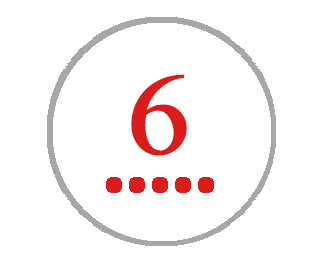
<style>
.page{position:relative;width:318px;height:276px;background:#ffffff}
.page>*{position:absolute;margin:0}
.t1{font:139.6px "OriyaMN";color:#dc1b1b}
</style>
<div class="page">
<p class="t1" style="left:131px;top:74px;width:56px;height:82px">6</p>
</div>
